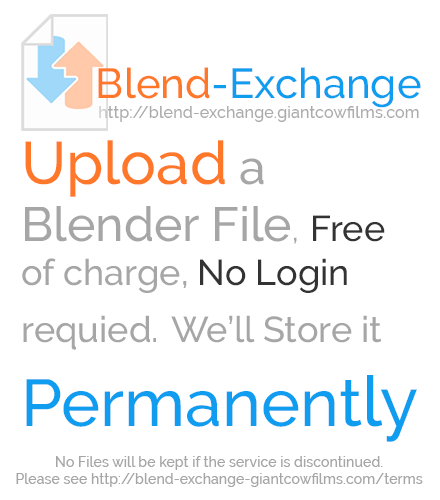
<style>
.page{position:relative;width:440px;height:500px;background:#ffffff}
.page>*{position:absolute;margin:0}
.t1{font:41.8px "Raleway-Medium";color:#109df0}
.t2{font:41.8px "Raleway-Medium";color:#ff782a}
.t3{font:16.2px "Raleway-Medium";color:#ababab}
.t4{font:36px "Raleway-Medium";color:#a6a6a6}
.t5{font:60px "Raleway-Medium";color:#ff782a}
.t6{font:48px "Raleway-Medium";color:#a6a6a6}
.t7{font:30px "Raleway-Medium";color:#a6a6a6}
.t8{font:36px "Raleway-Medium";color:#333333}
.t9{font:66px "Raleway-Medium";color:#109df0}
.t10{font:70px "Raleway-Medium";color:#109df0}
.t11{font:14.2px "Raleway-Medium";color:#a6a6a6}
</style>
<div class="page">
<p class="t1" style="left:98px;top:67px;width:323px;height:41px"><span class="t2">Blend</span>-Exchange</p>
<p class="t3" style="left:99px;top:106px;width:320px;height:16px">http://blend-exchange.giantcowfilms.com</p>
<p class="t4" style="left:22px;top:140px;width:395px;height:302px"><span class="t5">Upload </span><span class="t6">a Blender File</span><span class="t7">, </span><span class="t8">Free</span> of charge, <span class="t8">No Login</span> requied. We’ll Store it<br><span class="t9">Permanent</span><span class="t10">ly</span></p>
<p class="t11" style="left:16px;top:456px;width:407px;height:31px;text-align:center">No Files will be kept if the service is discontinued.<br>Please see http://blend-exchange-giantcowfilms.com/terms</p>
</div>
